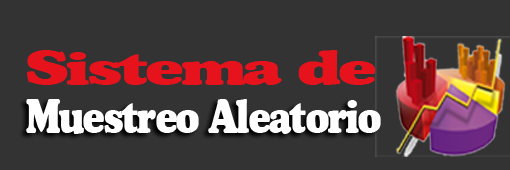
<style>
.page{position:relative;width:510px;height:170px;background:#333333}
.page>*{position:absolute;margin:0}
.t1{font:45.7px "Trondheim";color:#e6131d;scale:1.45 1}
.t2{font:46.2px "Trondheim";color:#ffffff;scale:0.82 1}
</style>
<div class="page">
<p class="t1" style="left:27px;top:50px;width:349px;height:35px">Sistema de</p>
<p class="t2" style="left:26px;top:99px;width:355px;height:35px">Muestreo Aleatorio</p>
</div>
